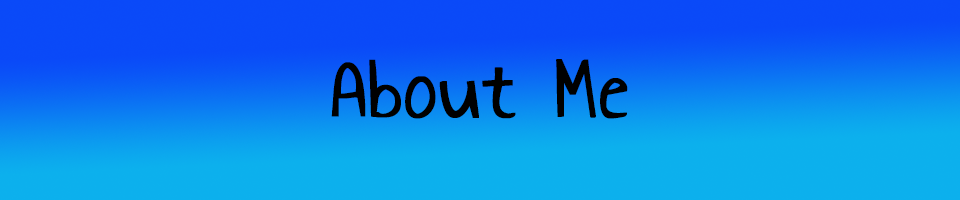
<style>
.page{position:relative;width:960px;height:200px}
.page>*{position:absolute;margin:0}
.t1{font:90px "AnnieUseYourTelescope-Regular";color:#000000;font-weight:bold}
</style>
<div class="page">
<p class="t1" style="left:331px;top:59px;width:297px;height:60px">About Me</p>
</div>
